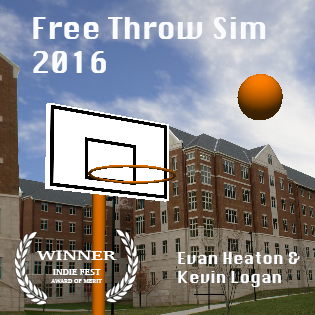
<style>
.page{position:relative;width:315px;height:315px}
.page>*{position:absolute;margin:0}
.t1{font:29px "Krungthep";color:#f9fbfe}
.t2{font:14.3px "Charter-Bold";color:#ffffff;scale:1.37 1}
.t3{font:16px "Krungthep";color:#f9fbfe}
.t4{font:9.2px "Charter-Bold";color:#ffffff;scale:0.97 1}
.t5{font:6.1px "Charter-Bold";color:#ffffff;scale:0.97 1}
</style>
<div class="page">
<p class="t1" style="left:33px;top:17px;width:233px;height:56px">Free Throw Sim<br>2016</p>
<p class="t2" style="left:37px;top:250px;width:80px;height:10px">WINNER</p>
<p class="t3" style="left:178px;top:252px;width:122px;height:35px">Evan Heaton &amp;<br>Kevin Logan</p>
<p class="t4" style="left:52px;top:269px;width:49px;height:6px">INDIE FEST</p>
<p class="t5" style="left:51px;top:279px;width:51px;height:4px">AWARD OF MERIT</p>
</div>
